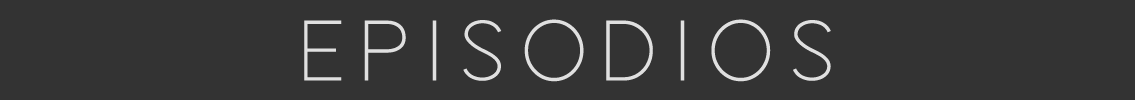
<style>
.page{position:relative;width:1135px;height:100px;background:#333333}
.page>*{position:absolute;margin:0}
.t1{font:92.5px "LOVES-REG";letter-spacing:-0.1em;color:#e0e0e0}
</style>
<div class="page">
<p class="t1" style="left:304px;top:19px;width:527px;height:63px">E p i s o d i o s</p>
</div>
